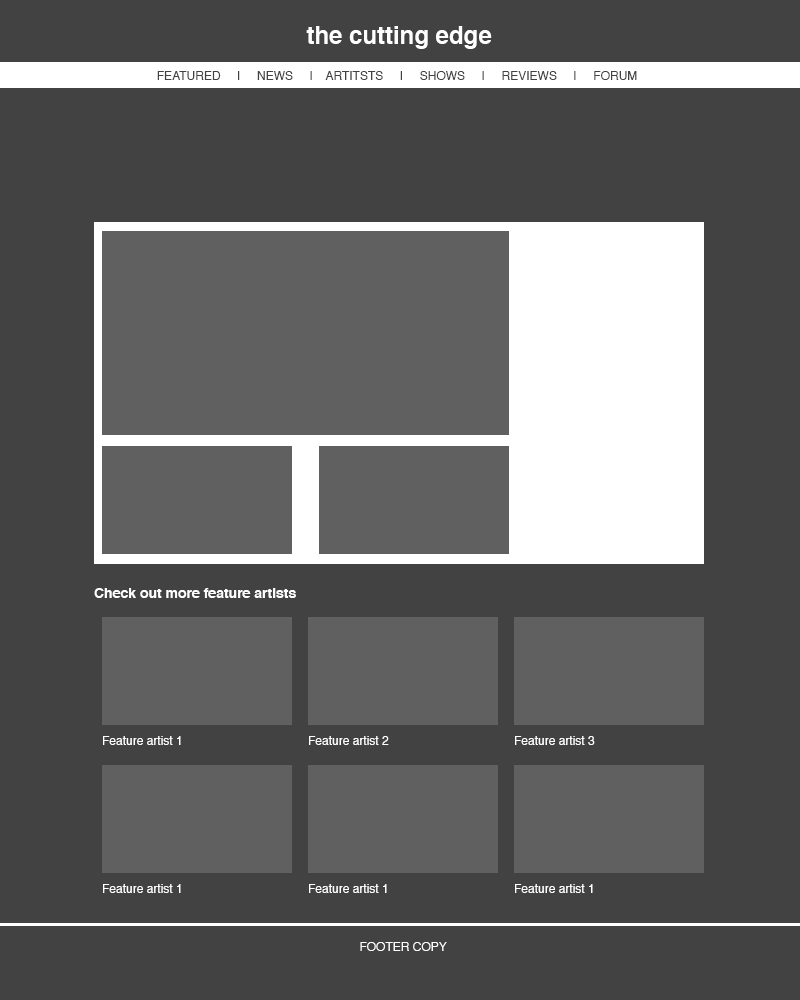
<style>
.page{position:relative;width:800px;height:1000px;background:#424242}
.page>*{position:absolute;margin:0}
.t1{font:24px "Helvetica-Bold";color:#ffffff}
.t2{font:12px "Helvetica";color:#424242;text-transform:uppercase}
.t3{font:14px "Helvetica-Bold";color:#ffffff}
.t4{font:12px "Helvetica";color:#ffffff}
.t5{font:12px "Helvetica";color:#fffefe;text-transform:uppercase}
</style>
<div class="page">
<p class="t1" style="left:306px;top:26px;width:186px;height:23px">the cutting edge</p>
<p class="t2" style="left:157px;top:71px;width:480px;height:9px">Featured     |     News     |    Artitsts     |     Shows     |     Reviews     |     Forum</p>
<p class="t3" style="left:94px;top:588px;width:202px;height:10px">Check out more feature artists</p>
<p class="t4" style="left:103px;top:736px;width:78px;height:9px">Feature artist 1</p>
<p class="t4" style="left:309px;top:736px;width:80px;height:9px">Feature artist 2</p>
<p class="t4" style="left:515px;top:736px;width:80px;height:9px">Feature artist 3</p>
<p class="t4" style="left:103px;top:884px;width:78px;height:9px">Feature artist 1</p>
<p class="t4" style="left:309px;top:884px;width:78px;height:9px">Feature artist 1</p>
<p class="t4" style="left:515px;top:884px;width:78px;height:9px">Feature artist 1</p>
<p class="t5" style="left:360px;top:942px;width:87px;height:9px">Footer copy</p>
</div>
